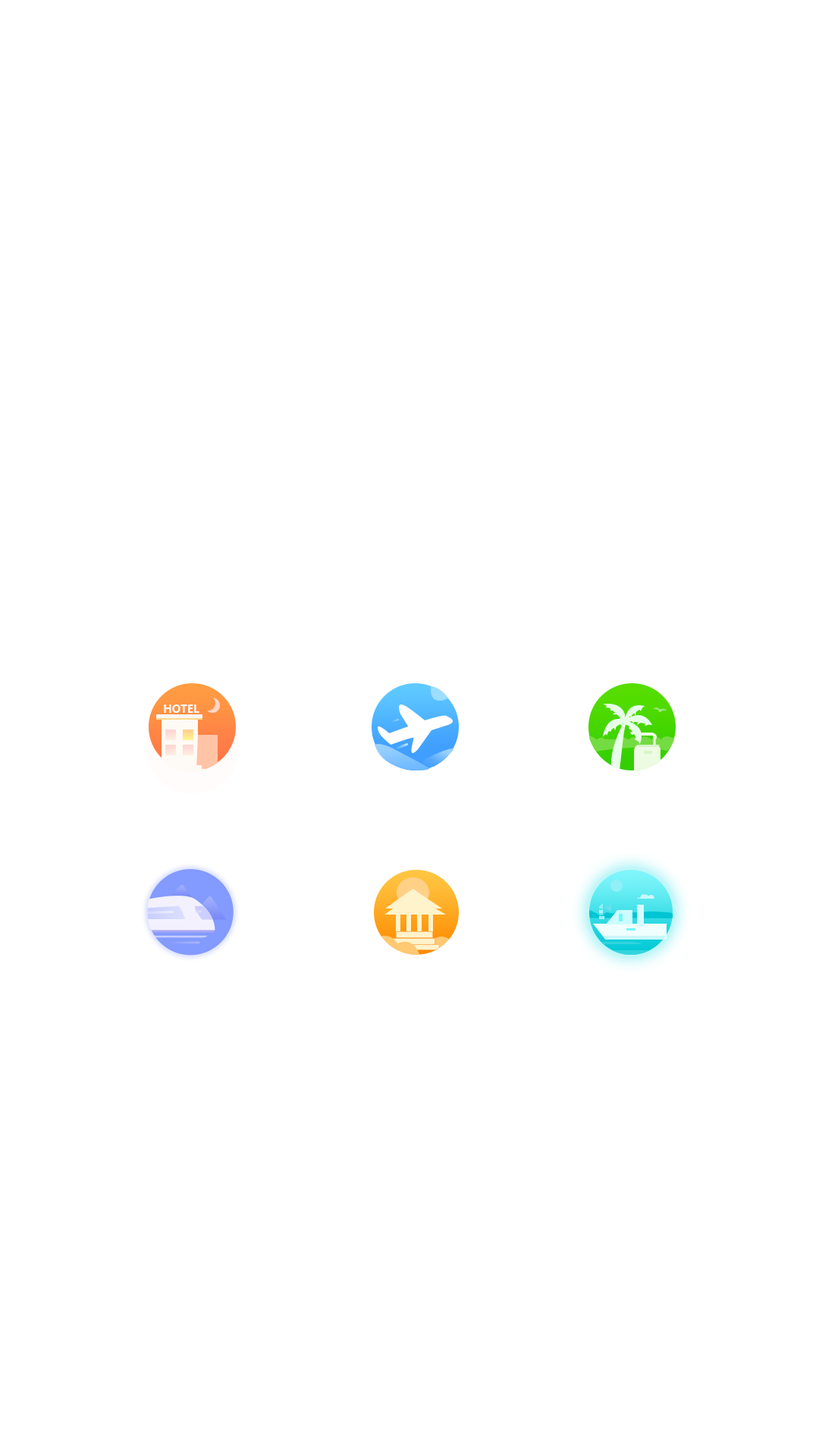
<style>
.page{position:relative;width:819px;height:1456px;background:#ffffff}
.page>*{position:absolute;margin:0}
.t1{font:10.6px "MicrosoftYaHei-Bold";color:#fefefe}
</style>
<div class="page">
<p class="t1" style="left:164px;top:704px;width:35px;height:9px">HOTEL</p>
</div>
